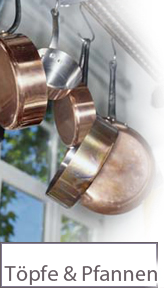
<style>
.page{position:relative;width:164px;height:288px}
.page>*{position:absolute;margin:0}
.t1{font:22px "Myriad-Roman";letter-spacing:0.005em;color:#685f64}
</style>
<div class="page">
<p class="t1" style="left:4px;top:265px;width:153px;height:20px">Töpfe &amp; Pfannen</p>
</div>
